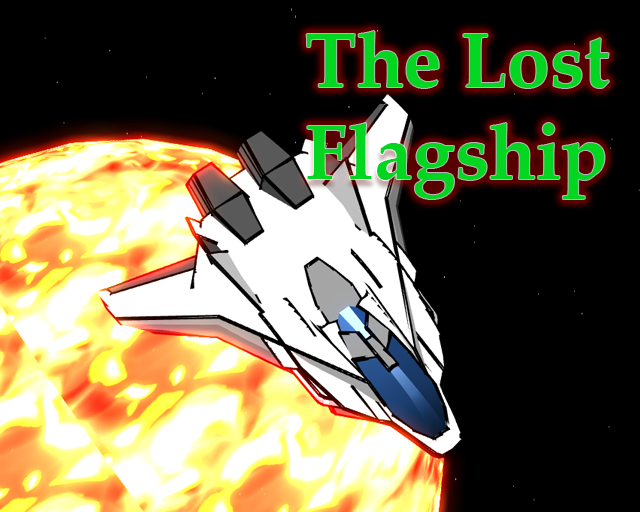
<style>
.page{position:relative;width:640px;height:512px;background:#000000}
.page>*{position:absolute;margin:0}
.t1{font:76.7px "PalatinoLinotype-Bold";color:#03d620}
</style>
<div class="page">
<p class="t1" style="left:306px;top:31px;width:303px;height:168px">The Lost <br>Flagship</p>
</div>
